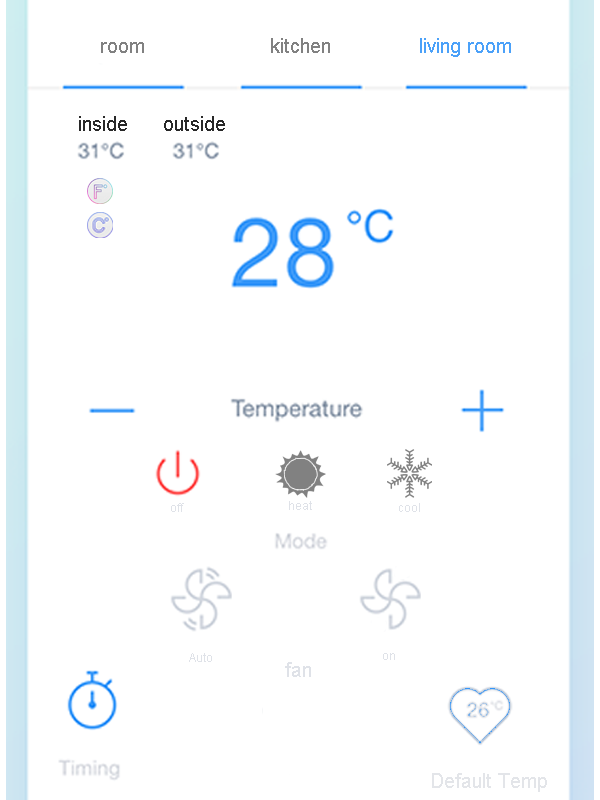
<style>
.page{position:relative;width:600px;height:800px;background:#ffffff}
.page>*{position:absolute;margin:0}
.t1{font:20px "ArialMT";color:#818181}
.t2{font:20px "ArialMT";color:#4ba1f9}
.t3{font:20px "ArialMT";color:#282828}
.t4{font:12px "ArialMT";color:#dfe2e8}
.t5{font:20px "ArialMT";color:#dfe2e8}
.t6{font:20px "ArialMT";color:#e3e5e9}
</style>
<div class="page">
<p class="t1" style="left:271px;top:38px;width:59px;height:15px">kitchen</p>
<p class="t1" style="left:271px;top:38px;width:59px;height:15px">kitchen</p>
<p class="t2" style="left:420px;top:38px;width:91px;height:19px">living room</p>
<p class="t1" style="left:101px;top:42px;width:43px;height:11px">room</p>
<p class="t1" style="left:101px;top:42px;width:43px;height:11px">room</p>
<p class="t3" style="left:79px;top:116px;width:48px;height:15px">inside</p>
<p class="t3" style="left:164px;top:116px;width:61px;height:15px">outside</p>
<p class="t4" style="left:171px;top:503px;width:13px;height:9px">off</p>
<p class="t4" style="left:289px;top:501px;width:23px;height:9px">heat</p>
<p class="t4" style="left:399px;top:503px;width:21px;height:9px">cool</p>
<p class="t4" style="left:189px;top:653px;width:23px;height:9px">Auto</p>
<p class="t4" style="left:383px;top:653px;width:12px;height:7px">on</p>
<p class="t5" style="left:285px;top:662px;width:26px;height:15px">fan</p>
<p class="t6" style="left:432px;top:773px;width:115px;height:19px">Default Temp</p>
</div>
